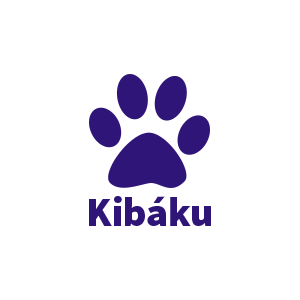
<style>
.page{position:relative;width:300px;height:300px;background:#ffffff}
.page>*{position:absolute;margin:0}
.t1{font:40.5px "SourceSansPro-Black";color:#301579}
</style>
<div class="page">
<p class="t1" style="left:89px;top:196px;width:122px;height:30px">Kibáku</p>
</div>
